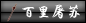
<style>
.page{position:relative;width:86px;height:23px}
.page>*{position:absolute;margin:0}
.t1{font:15px "HYi4gj";color:#ffffff}
</style>
<div class="page">
<p class="t1" style="left:22px;top:4px;width:58px;height:15px">百里屠苏</p>
</div>
